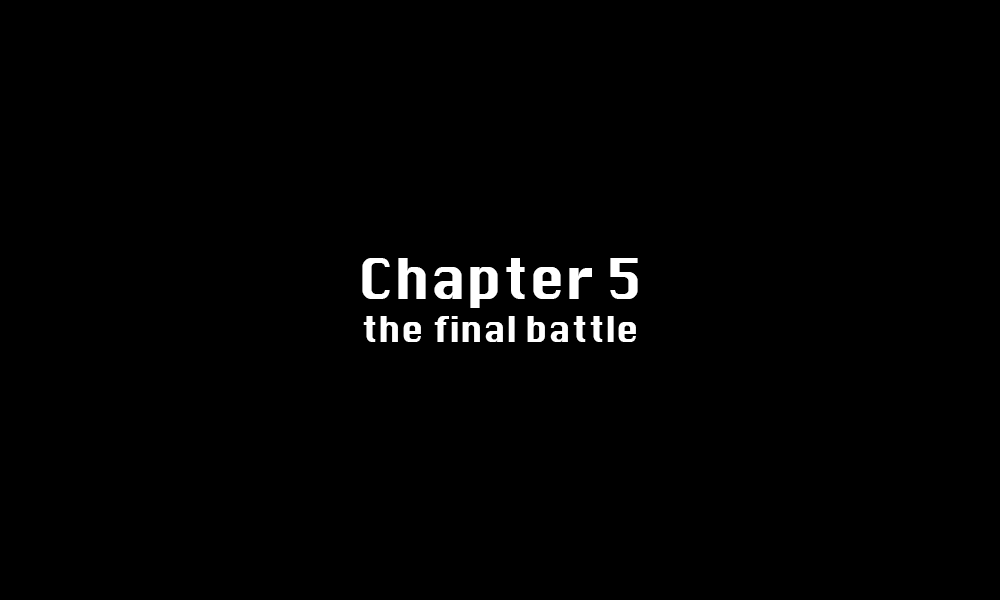
<style>
.page{position:relative;width:1000px;height:600px;background:#000000}
.page>*{position:absolute;margin:0}
.t1{font:54px "Krungthep";color:#ffffff}
.t2{font:36px "Krungthep";color:#ffffff}
.t3{font:34px "Krungthep";color:#ffffff}
</style>
<div class="page">
<p class="t1" style="left:362px;top:258px;width:276px;height:50px"><span class="t2"><br><br></span>Chapter 5</p>
<p class="t3" style="left:363px;top:316px;width:273px;height:26px">the final battle</p>
</div>
